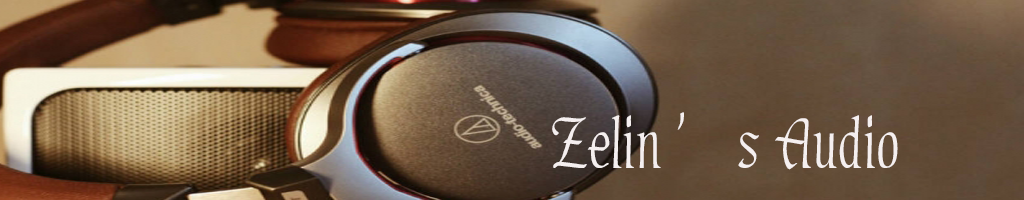
<style>
.page{position:relative;width:1024px;height:200px}
.page>*{position:absolute;margin:0}
.t1{font:75px "FZXZTFW--GB1-0";color:#f5efef}
</style>
<div class="page">
<p class="t1" style="left:552px;top:112px;width:346px;height:58px">Zelin’s Audio</p>
</div>
